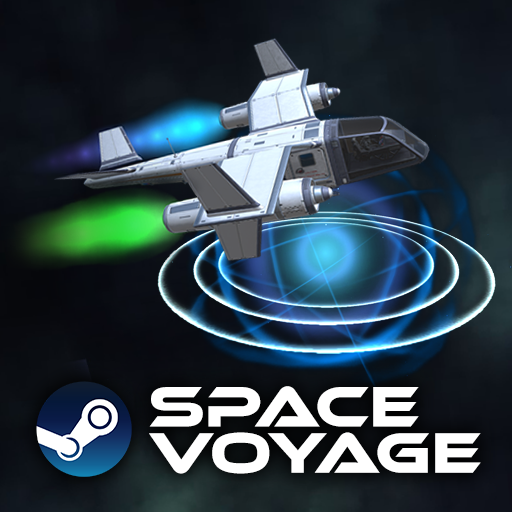
<style>
.page{position:relative;width:512px;height:512px}
.page>*{position:absolute;margin:0}
.t1{font:59.1px/46.3px "EthnocentricRg-Regular";letter-spacing:0.01em;color:#ffffff}
</style>
<div class="page">
<p class="t1" style="left:149px;top:386px;width:332px;height:88px">SPACE <br>VOYAGE</p>
</div>
